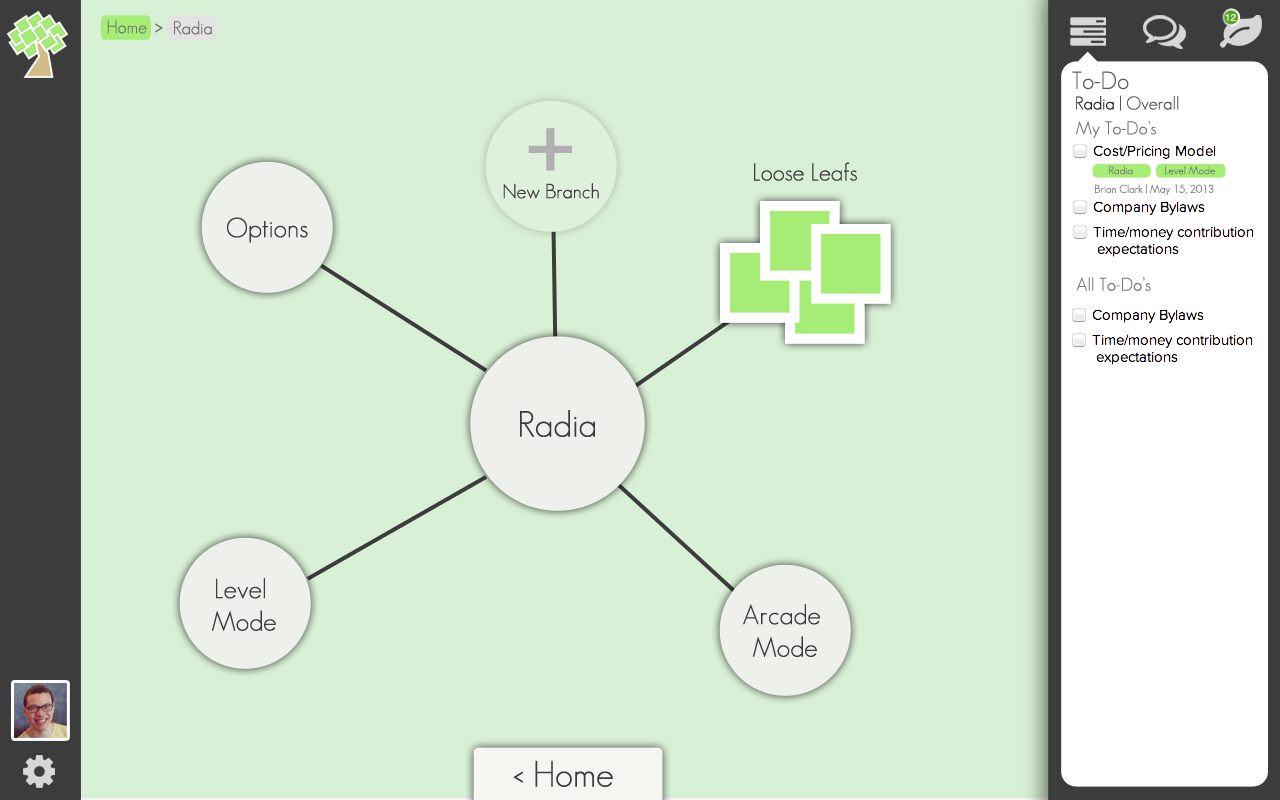
<style>
.page{position:relative;width:1280px;height:800px;background:#d8f0d5}
.page>*{position:absolute;margin:0}
.t1{font:10px "Helvetica";color:#ffffff}
.t2{font:18px "GeosansLight";color:#747474}
.t3{font:30px "GeosansLight";color:#747474}
.t4{font:24px "GeosansLight";color:#5a5a5a}
.t5{font:18px "GeosansLight";color:#565656}
.t6{font:18px "GeosansLight";color:#2d2727}
.t7{font:172px "GeosansLight";color:#b0b0b0}
.t8{font:24px "GeosansLight";color:#3c3c3c}
.t9{font:11px "GeosansLight";color:#747474}
.t10{font:20px "GeosansLight";color:#3c3c3c}
.t11{font:27px "GeosansLight";color:#3c3c3c}
.t12{font:36px "GeosansLight";color:#3c3c3c}
</style>
<div class="page">
<p class="t1" style="left:1225px;top:13px;width:11px;height:8px">12</p>
<p class="t2" style="left:107px;top:20px;width:40px;height:14px">Home</p>
<p class="t3" style="left:155px;top:23px;width:8px;height:10px">&gt;</p>
<p class="t2" style="left:174px;top:20px;width:38px;height:15px">Radia</p>
<p class="t4" style="left:1072px;top:71px;width:57px;height:19px">To-Do</p>
<p class="t5" style="left:1076px;top:95px;width:103px;height:16px"><span class="t6">Radia </span>| Overall</p>
<p class="t2" style="left:1076px;top:121px;width:81px;height:17px">My To-Do’s</p>
<p class="t7" style="left:528px;top:128px;width:44px;height:43px">+</p>
<p class="t8" style="left:754px;top:162px;width:103px;height:19px">Loose Leafs</p>
<p class="t9" style="left:1109px;top:166px;width:24px;height:9px">Radia</p>
<p class="t9" style="left:1165px;top:166px;width:50px;height:9px">Level Mode</p>
<p class="t10" style="left:503px;top:183px;width:96px;height:16px">New Branch</p>
<p class="t9" style="left:1095px;top:184px;width:119px;height:11px">Brian Clark | May 15, 2013</p>
<p class="t11" style="left:227px;top:217px;width:81px;height:26px">Options</p>
<p class="t2" style="left:1076px;top:277px;width:75px;height:14px">All To-Do’s</p>
<p class="t12" style="left:520px;top:410px;width:75px;height:27px">Radia</p>
<p class="t11" style="left:212px;top:578px;width:64px;height:54px;text-align:center">Level <br>Mode</p>
<p class="t11" style="left:743px;top:604px;width:77px;height:54px;text-align:center">Arcade <br>Mode</p>
<p class="t12" style="left:513px;top:760px;width:100px;height:27px">&lt; Home</p>
</div>
